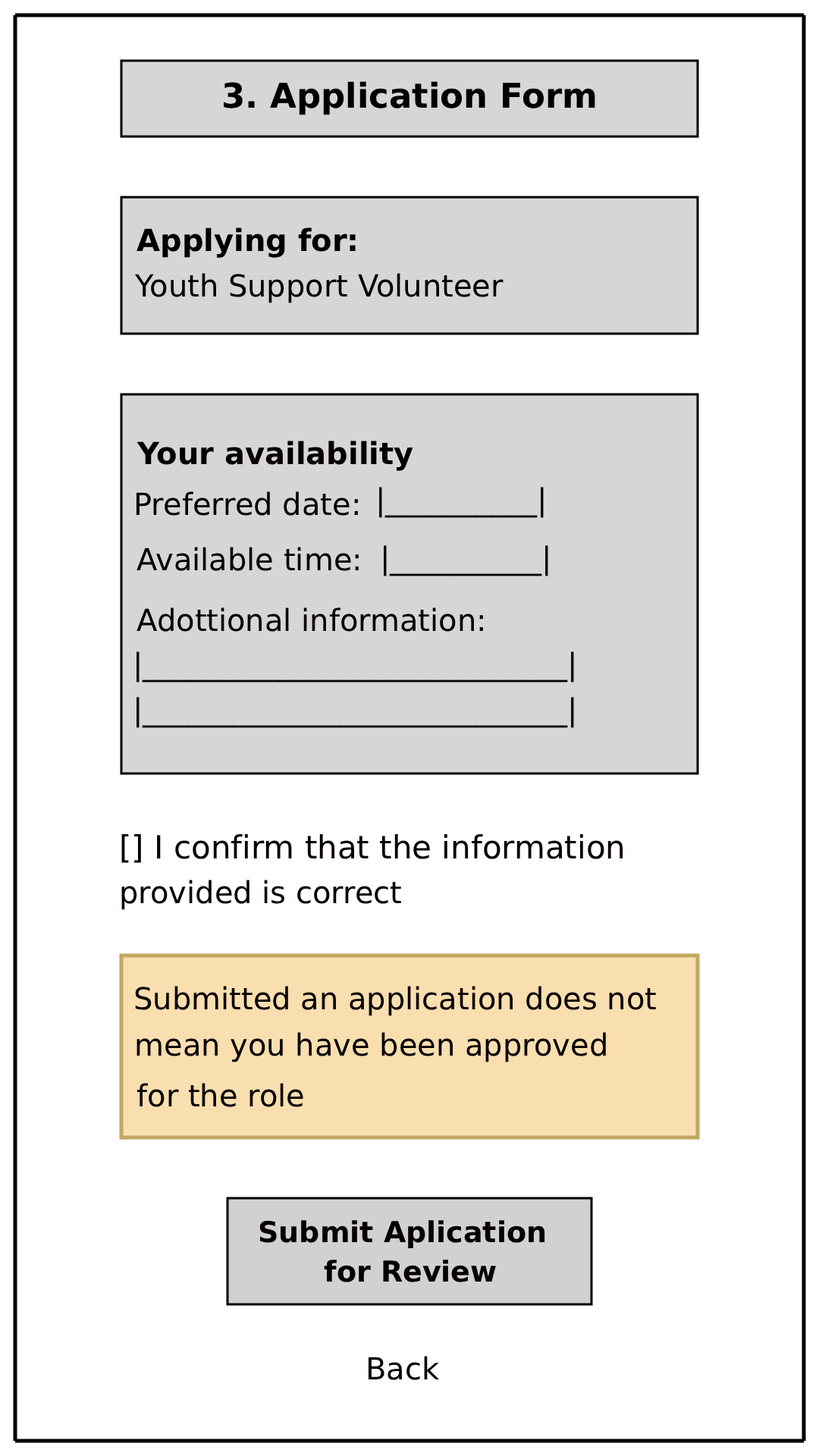
<style>
.page{position:relative;width:819px;height:1456px;background:#ffffff}
.page>*{position:absolute;margin:0}
.t1{font:34.1px "DejaVuSans-Bold";color:#000000}
.t2{font:30.3px "DejaVuSans-Bold";color:#000000}
.t3{font:30.3px "DejaVuSans";color:#000000}
.t4{font:30.3px "DejaVuSans-Bold";color:#060000}
.t5{font:30.3px "DejaVuSans";color:#060000}
.t6{font:31.8px "DejaVuSans";color:#060000}
.t7{font:28.8px "DejaVuSans-Bold";color:#060000}
</style>
<div class="page">
<p class="t1" style="left:224px;top:81px;width:371px;height:34px">3. Application Form</p>
<p class="t2" style="left:136px;top:227px;width:220px;height:31px">Applying for:</p>
<p class="t3" style="left:134px;top:273px;width:370px;height:30px">Youth Support Volunteer</p>
<p class="t4" style="left:136px;top:441px;width:277px;height:30px">Your availability</p>
<p class="t5" style="left:136px;top:491px;width:222px;height:25px">Preferred date:</p>
<p class="t5" style="left:379px;top:487px;width:165px;height:31px">|__________|</p>
<p class="t5" style="left:384px;top:545px;width:164px;height:31px">|__________|</p>
<p class="t5" style="left:136px;top:547px;width:223px;height:24px">Available time:</p>
<p class="t5" style="left:136px;top:607px;width:347px;height:25px">Adottional information:</p>
<p class="t5" style="left:136px;top:651px;width:438px;height:31px">|____________________________|</p>
<p class="t5" style="left:136px;top:697px;width:438px;height:31px">|____________________________|</p>
<p class="t6" style="left:121px;top:834px;width:502px;height:29px">[] I confirm that the information</p>
<p class="t5" style="left:121px;top:880px;width:280px;height:30px">provided is correct</p>
<p class="t5" style="left:135px;top:986px;width:521px;height:30px">Submitted an application does not</p>
<p class="t5" style="left:136px;top:1032px;width:470px;height:30px">mean you have been approved</p>
<p class="t5" style="left:136px;top:1083px;width:167px;height:24px">for the role</p>
<p class="t7" style="left:259px;top:1220px;width:286px;height:28px">Submit Aplication</p>
<p class="t7" style="left:324px;top:1260px;width:172px;height:22px">for Review</p>
<p class="t3" style="left:368px;top:1356px;width:72px;height:24px">Back</p>
</div>
